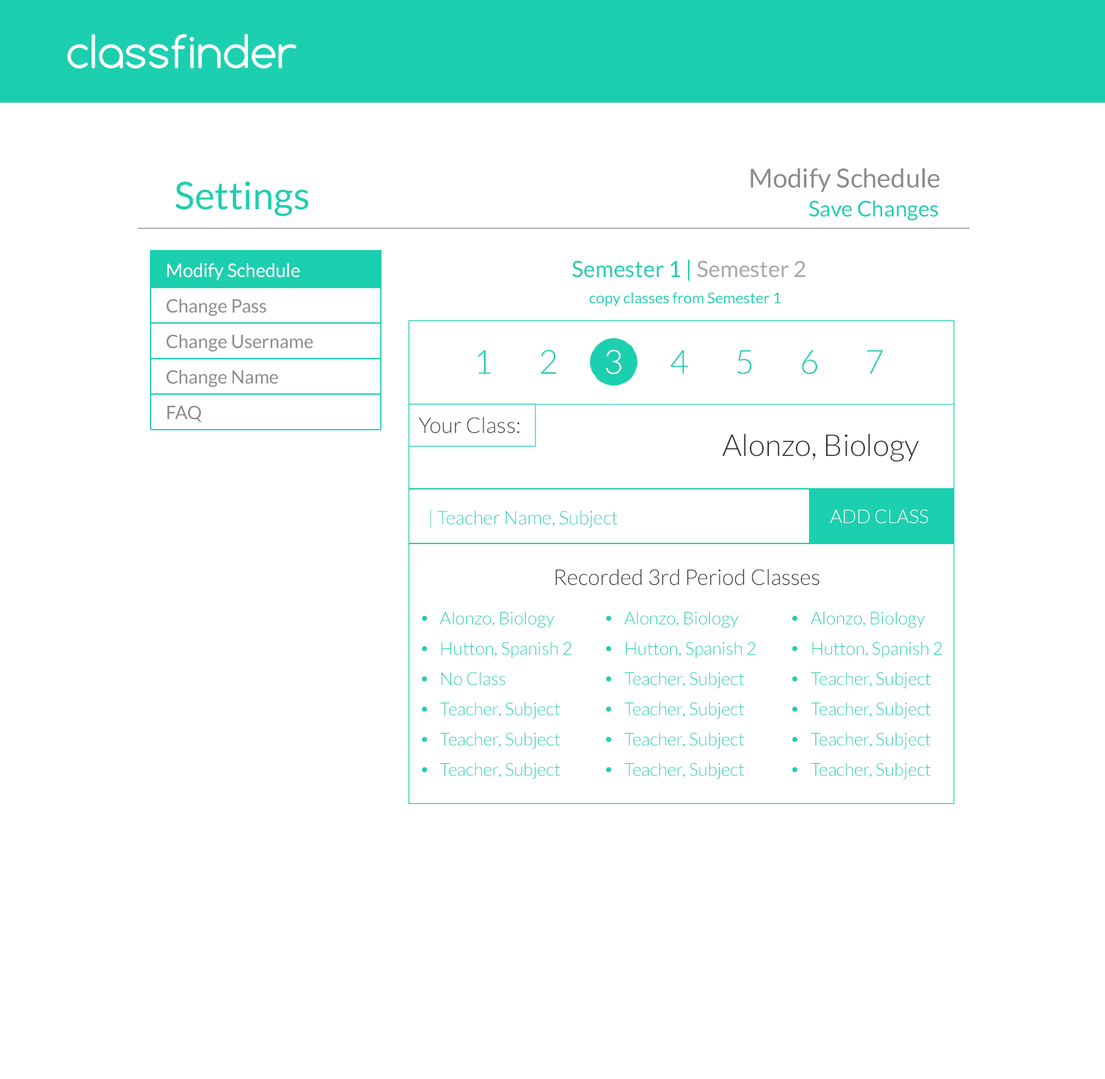
<style>
.page{position:relative;width:1105px;height:1079px;background:#ffffff}
.page>*{position:absolute;margin:0}
.t1{font:26.3px "Lato-Regular";color:#8b8b8b}
.t2{font:38.2px "Lato-Regular";color:#1ccfaf}
.t3{font:21.7px "Lato-Regular";color:#1ccfaf}
.t4{font:18.4px "Lato-Regular";color:#ffffff}
.t5{font:22.4px "Lato-Regular";color:#1ccfaf}
.t6{font:22.4px "Lato-Regular";color:#a6a6a6}
.t7{font:15.1px "Lato-Regular";color:#1ccfaf}
.t8{font:18.4px "Lato-Regular";color:#8b8b8b}
.t9{font:33.3px "Lato-Light";color:#1ccfaf}
.t10{font:33.3px "Lato-Light";color:#ffffff}
.t11{font:21.8px "Lato-Light";color:#393939}
.t12{font:30.2px "Lato-Light";color:#2f2f2f}
.t13{font:18.7px "Lato-Light";color:#1ccfaf}
.t14{font:18.7px "Lato-Light";color:#ffffff}
.t15{font:21.8px "Lato-Light";color:#2f2f2f}
.t16{font:55.8px "Lato-Light";color:#1ccfaf}
.t17{font:17.5px "Lato-Light";color:#1ccfaf}
</style>
<div class="page">
<p class="t1" style="left:751px;top:168px;width:189px;height:24px">Modify Schedule</p>
<p class="t2" style="left:175px;top:181px;width:134px;height:35px">Settings</p>
<p class="t3" style="left:809px;top:200px;width:129px;height:20px">Save Changes</p>
<p class="t4" style="left:167px;top:263px;width:133px;height:17px">Modify Schedule</p>
<p class="t5" style="left:572px;top:259px;width:233px;height:22px">Semester 1 | <span class="t6">Semester 2</span></p>
<p class="t7" style="left:589px;top:292px;width:192px;height:14px">copy classes from Semester 1</p>
<p class="t8" style="left:166px;top:299px;width:100px;height:17px">Change Pass</p>
<p class="t8" style="left:166px;top:334px;width:147px;height:18px">Change Username</p>
<p class="t9" style="left:478px;top:349px;width:405px;height:25px">1   2   <span class="t10">3 </span>  4   5   6   7</p>
<p class="t8" style="left:166px;top:370px;width:112px;height:17px">Change Name</p>
<p class="t8" style="left:167px;top:405px;width:35px;height:17px">FAQ</p>
<p class="t11" style="left:418px;top:417px;width:102px;height:17px">Your Class:</p>
<p class="t12" style="left:722px;top:434px;width:197px;height:28px">Alonzo, Biology</p>
<p class="t13" style="left:430px;top:510px;width:188px;height:18px">| Teacher Name, Subject</p>
<p class="t14" style="left:830px;top:509px;width:98px;height:15px">ADD CLASS</p>
<p class="t15" style="left:556px;top:569px;width:264px;height:17px">Recorded 3rd Period Classes</p>
<p class="t16" style="left:422px;top:616px;width:6px;height:5px">.</p>
<p class="t17" style="left:439px;top:611px;width:116px;height:17px">Alonzo, Biology</p>
<p class="t16" style="left:606px;top:616px;width:6px;height:5px">.</p>
<p class="t17" style="left:624px;top:611px;width:115px;height:17px">Alonzo, Biology</p>
<p class="t16" style="left:792px;top:616px;width:6px;height:5px">.</p>
<p class="t17" style="left:810px;top:611px;width:116px;height:17px">Alonzo, Biology</p>
<p class="t17" style="left:441px;top:641px;width:131px;height:17px">Hutton, Spanish 2</p>
<p class="t17" style="left:626px;top:641px;width:130px;height:17px">Hutton, Spanish 2</p>
<p class="t17" style="left:812px;top:641px;width:130px;height:17px">Hutton, Spanish 2</p>
<p class="t16" style="left:422px;top:646px;width:6px;height:5px">.</p>
<p class="t16" style="left:606px;top:646px;width:6px;height:5px">.</p>
<p class="t16" style="left:792px;top:646px;width:6px;height:5px">.</p>
<p class="t16" style="left:422px;top:676px;width:6px;height:6px">.</p>
<p class="t17" style="left:441px;top:672px;width:64px;height:14px">No Class</p>
<p class="t16" style="left:606px;top:676px;width:6px;height:6px">.</p>
<p class="t17" style="left:624px;top:672px;width:121px;height:16px">Teacher, Subject</p>
<p class="t16" style="left:792px;top:676px;width:6px;height:6px">.</p>
<p class="t17" style="left:811px;top:672px;width:120px;height:16px">Teacher, Subject</p>
<p class="t17" style="left:440px;top:702px;width:121px;height:16px">Teacher, Subject</p>
<p class="t17" style="left:624px;top:702px;width:121px;height:16px">Teacher, Subject</p>
<p class="t17" style="left:811px;top:702px;width:120px;height:16px">Teacher, Subject</p>
<p class="t16" style="left:422px;top:707px;width:6px;height:5px">.</p>
<p class="t16" style="left:606px;top:707px;width:6px;height:5px">.</p>
<p class="t16" style="left:792px;top:707px;width:6px;height:5px">.</p>
<p class="t16" style="left:422px;top:737px;width:6px;height:5px">.</p>
<p class="t17" style="left:440px;top:732px;width:121px;height:17px">Teacher, Subject</p>
<p class="t16" style="left:606px;top:737px;width:6px;height:5px">.</p>
<p class="t17" style="left:624px;top:732px;width:121px;height:17px">Teacher, Subject</p>
<p class="t16" style="left:792px;top:737px;width:6px;height:5px">.</p>
<p class="t17" style="left:811px;top:732px;width:120px;height:17px">Teacher, Subject</p>
<p class="t16" style="left:422px;top:767px;width:6px;height:5px">.</p>
<p class="t17" style="left:440px;top:762px;width:121px;height:17px">Teacher, Subject</p>
<p class="t16" style="left:606px;top:767px;width:6px;height:5px">.</p>
<p class="t17" style="left:624px;top:762px;width:121px;height:17px">Teacher, Subject</p>
<p class="t16" style="left:792px;top:767px;width:6px;height:5px">.</p>
<p class="t17" style="left:811px;top:762px;width:120px;height:17px">Teacher, Subject</p>
</div>
